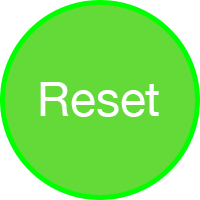
<style>
.page{position:relative;width:200px;height:200px;background:#63da38}
.page>*{position:absolute;margin:0}
.t1{font:48px "HelveticaNeue";color:#fefefe}
</style>
<div class="page">
<p class="t1" style="left:40px;top:82px;width:119px;height:35px">Reset</p>
</div>
